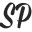
<style>
.page{position:relative;width:32px;height:32px;background:#ffffff}
.page>*{position:absolute;margin:0}
.t1{font:36px "Mission-Script";color:#272727}
</style>
<div class="page">
<p class="t1" style="left:0px;top:2px;width:32px;height:27px">SP</p>
</div>
